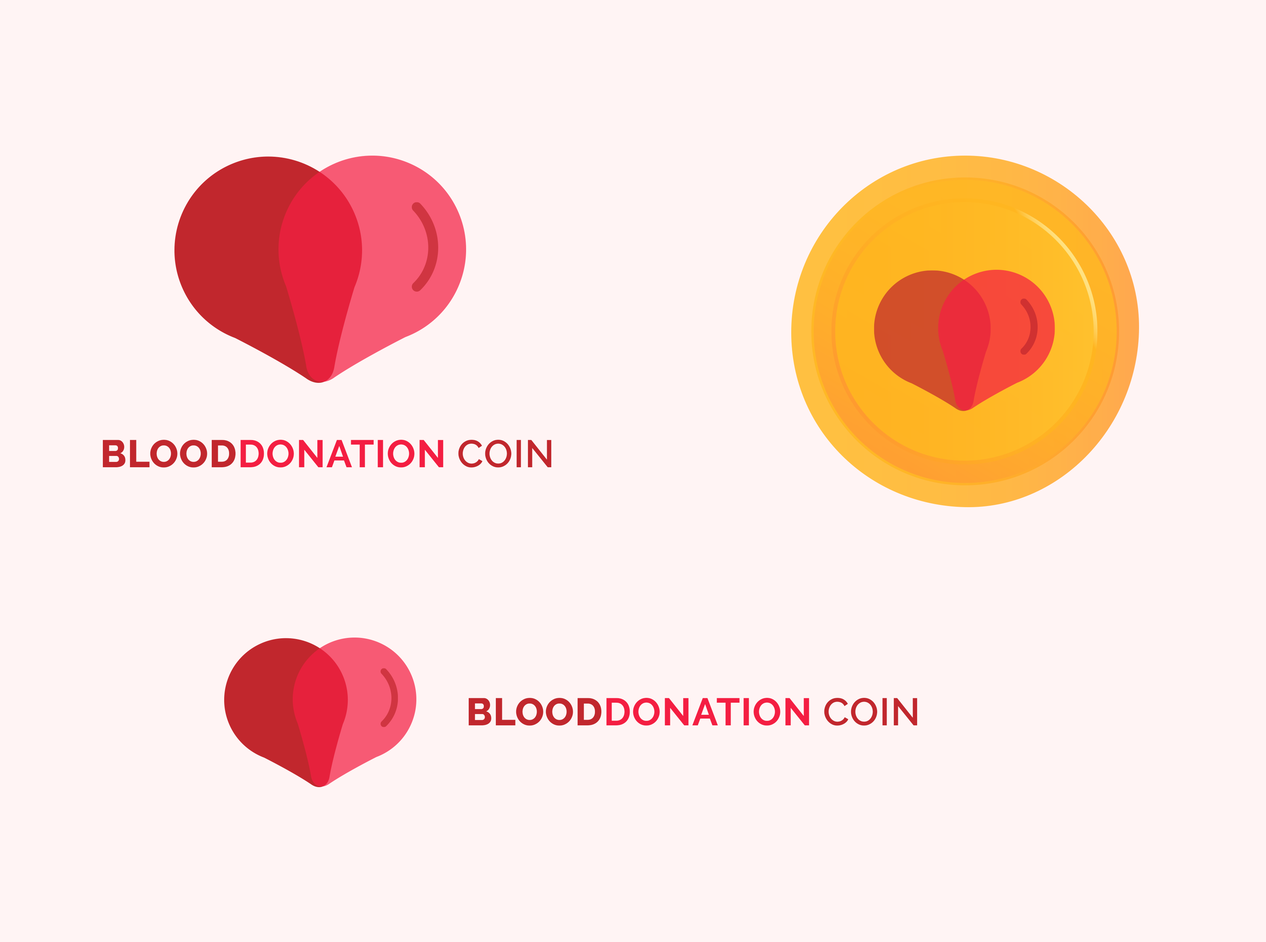
<style>
.page{position:relative;width:1266px;height:942px;background:#fff4f4}
.page>*{position:absolute;margin:0}
.t1{font:38.6px "Raleway-Bold";letter-spacing:0.02em;color:#f41e42}
.t2{font:38.6px "Raleway-ExtraBold";letter-spacing:0.02em;color:#c1272d}
.t3{font:38.6px "Raleway-SemiBold";letter-spacing:0.02em;color:#c1272d}
</style>
<div class="page">
<p class="t1" style="left:102px;top:440px;width:450px;height:28px"><span class="t2">BLOOD</span>DONATION <span class="t3">COIN</span></p>
<p class="t1" style="left:468px;top:698px;width:449px;height:28px"><span class="t2">BLOOD</span>DONATION <span class="t3">COIN</span></p>
</div>
